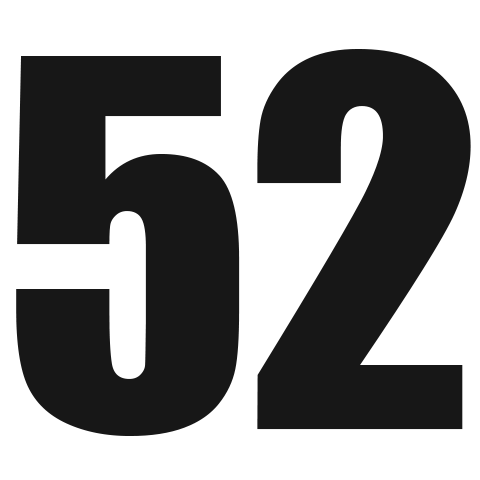
<style>
.page{position:relative;width:480px;height:480px;background:#171717}
.page>*{position:absolute;margin:0}
.t1{font:472.3px "Impact";color:#171717}
</style>
<div class="page">
<p class="t1" style="left:16px;top:49px;width:455px;height:387px">52</p>
</div>
